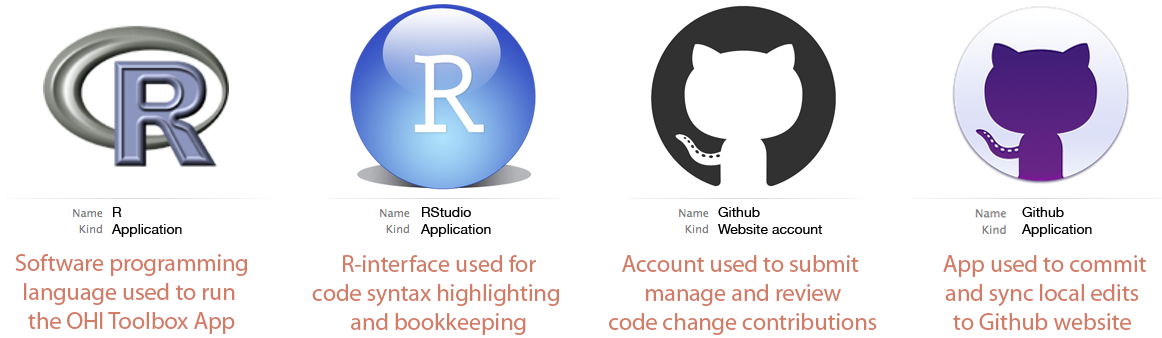
<style>
.page{position:relative;width:1162px;height:338px;background:#ffffff}
.page>*{position:absolute;margin:0}
.t1{font:14px "HelveticaNeue";color:#000000}
.t2{font:24px "MyriadPro-Regular";color:#d27b67}
</style>
<div class="page">
<p class="t1" style="left:111px;top:207px;width:71px;height:30px">R<br>Application</p>
<p class="t1" style="left:420px;top:207px;width:71px;height:30px">RStudio<br>Application</p>
<p class="t1" style="left:718px;top:207px;width:105px;height:27px">Github<br>Website account</p>
<p class="t1" style="left:1021px;top:207px;width:71px;height:30px">Github<br>Application</p>
<p class="t2" style="left:15px;top:254px;width:232px;height:80px;text-align:center">Software programming<br>language used to run <br>the OHI Toolbox App</p>
<p class="t2" style="left:312px;top:255px;width:247px;height:80px;text-align:center">R-interface used for<br>code syntax highlighting <br>and bookkeeping</p>
<p class="t2" style="left:609px;top:255px;width:268px;height:80px;text-align:center">Account used to submit <br>manage and review<br>code change contributions</p>
<p class="t2" style="left:943px;top:255px;width:203px;height:75px;text-align:center">App used to commit<br>and sync local edits <br>to Github website</p>
</div>
